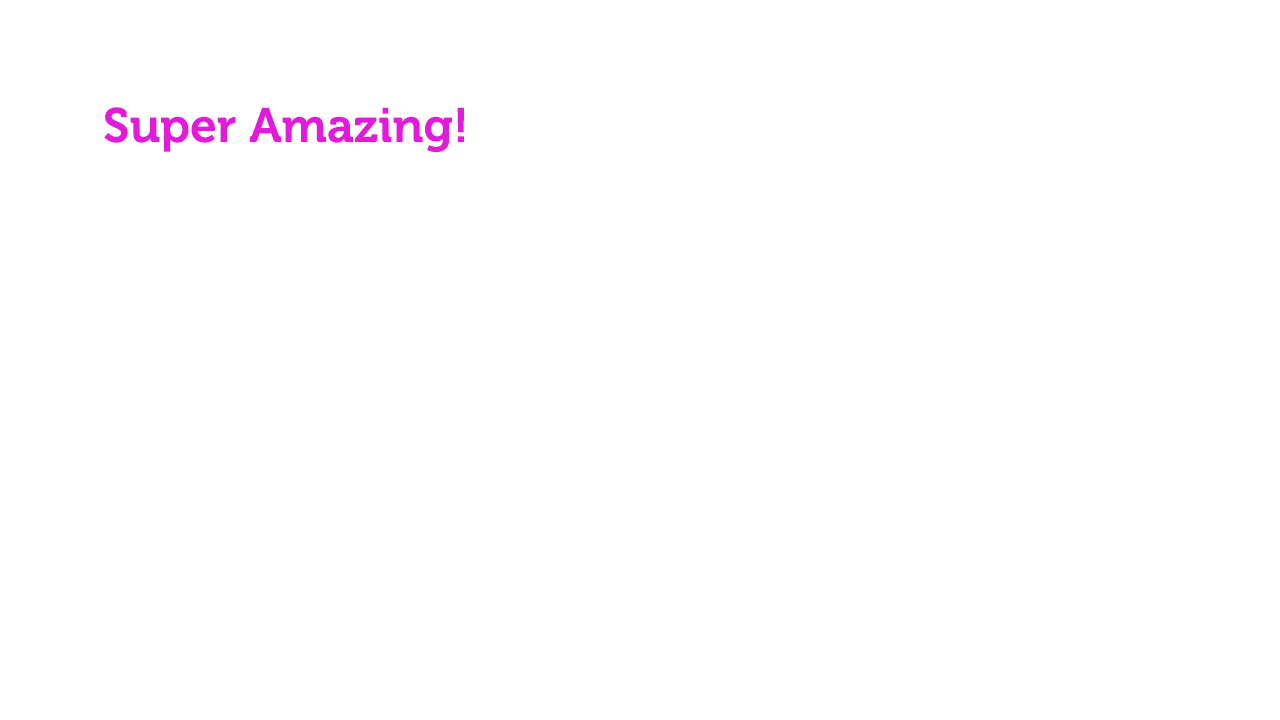
<style>
.page{position:relative;width:1280px;height:720px;background:#ffffff}
.page>*{position:absolute;margin:0}
.t1{font:48px "Museo-700";color:#e21bdb}
</style>
<div class="page">
<p class="t1" style="left:104px;top:107px;width:361px;height:46px">Super Amazing!</p>
</div>
